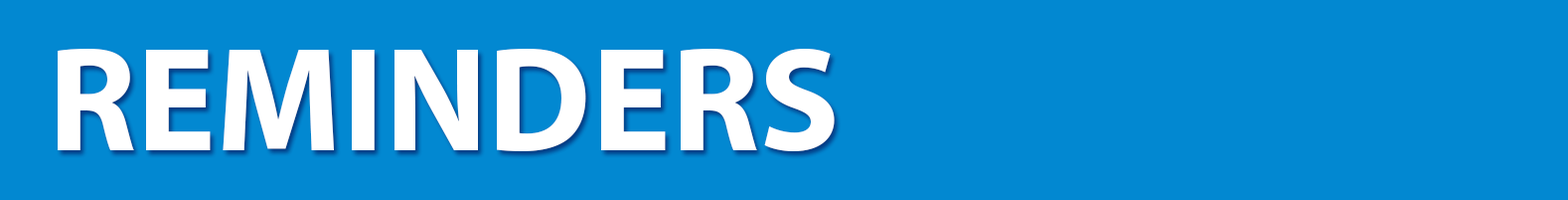
<style>
.page{position:relative;width:1568px;height:200px;background:#0288d1}
.page>*{position:absolute;margin:0}
.t1{font:149px "MyriadPro-Bold";color:#ffffff}
</style>
<div class="page">
<p class="t1" style="left:58px;top:49px;width:777px;height:102px">REMINDERS</p>
</div>
